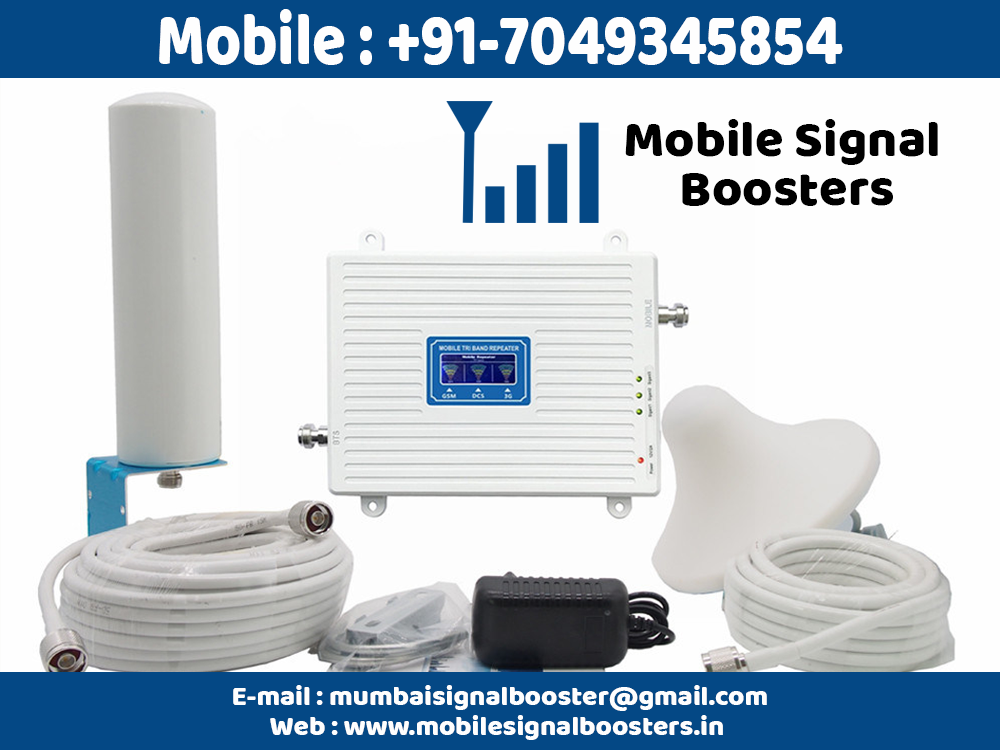
<style>
.page{position:relative;width:1000px;height:750px;background:#fefefe}
.page>*{position:absolute;margin:0}
.t1{font:74.9px "BalooBhai-Regular";color:#fefefe;scale:0.82 1}
.t2{font:52.4px/48.8px "BalooBhai-Regular";color:#000000}
.t3{font:28px/30px "BalooBhai-Regular";color:#fefefe}
</style>
<div class="page">
<p class="t1" style="left:159px;top:9px;width:684px;height:56px">Mobile : +91-7049345854</p>
<p class="t2" style="left:625px;top:119px;width:313px;height:87px;text-align:center">Mobile Signal <br>Boosters</p>
<p class="t3" style="left:233px;top:685px;width:534px;height:55px;text-align:center">E-mail : mumbaisignalbooster@gmail.com <br>Web : www.mobilesignalboosters.in</p>
</div>
